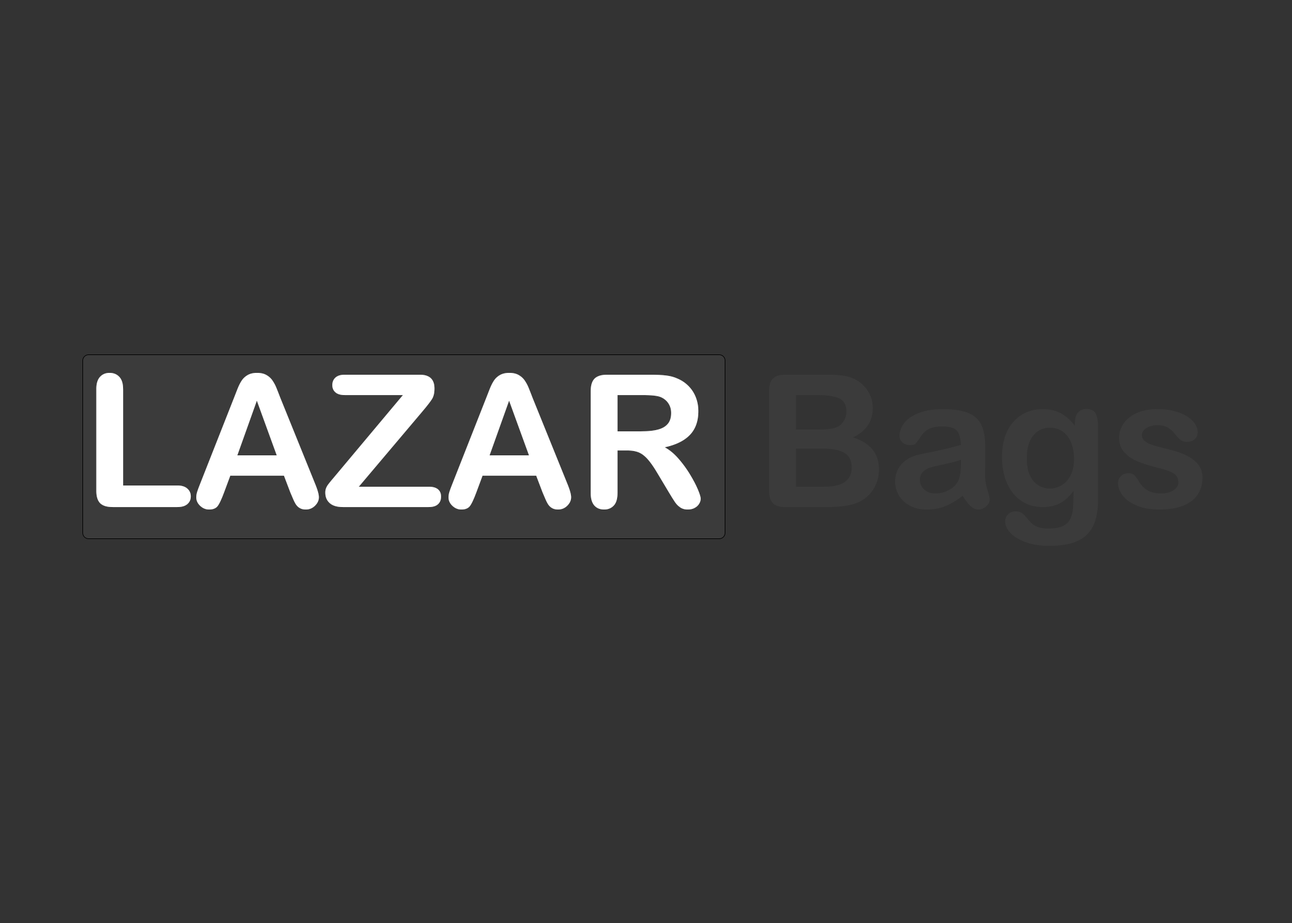
<style>
.page{position:relative;width:1292px;height:923px;background:#333333}
.page>*{position:absolute;margin:0}
.t1{font:184.6px "ArialRoundedMTBold";color:#ffffff}
.t2{font:184.6px "SitkaHeading";color:#000000}
.t3{font:184.6px "ArialRoundedMTBold";color:#3b3b3b}
</style>
<div class="page">
<p class="t1" style="left:96px;top:373px;width:1107px;height:173px"><span class="t2"><br></span>LAZAR <span class="t3">Bags</span></p>
</div>
